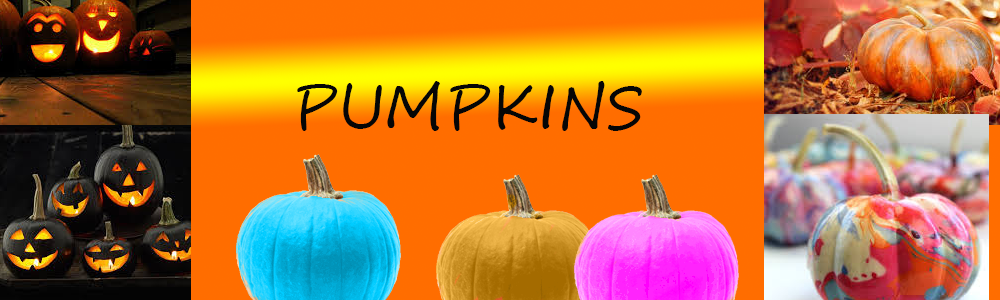
<style>
.page{position:relative;width:1000px;height:300px}
.page>*{position:absolute;margin:0}
.t1{font:60px "SegoeScript";color:#060606}
</style>
<div class="page">
<p class="t1" style="left:297px;top:81px;width:345px;height:50px">PUMPKINS</p>
</div>
